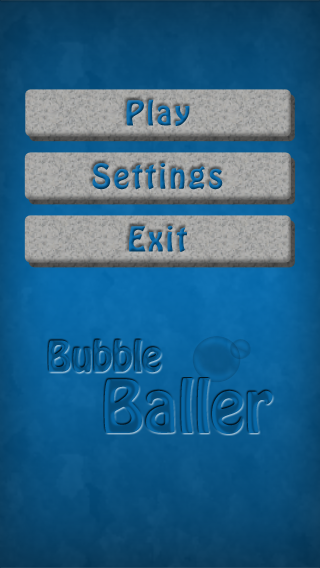
<style>
.page{position:relative;width:320px;height:568px}
.page>*{position:absolute;margin:0}
.t1{font:30.3px "HoboStd";letter-spacing:0.08em;color:#0767a6}
</style>
<div class="page">
<p class="t1" style="left:126px;top:99px;width:64px;height:27px">Play</p>
<p class="t1" style="left:92px;top:163px;width:131px;height:27px">Settings</p>
<p class="t1" style="left:129px;top:225px;width:58px;height:27px">Exit</p>
</div>
